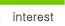
<style>
.page{position:relative;width:65px;height:26px;background:#ffffff}
.page>*{position:absolute;margin:0}
.t1{font:12px "Gulim";color:#464646}
</style>
<div class="page">
<p class="t1" style="left:13px;top:12px;width:41px;height:10px">interest</p>
</div>
